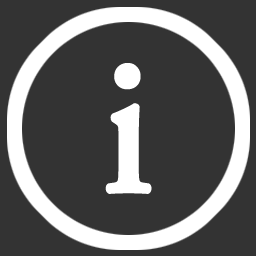
<style>
.page{position:relative;width:256px;height:256px;background:#333333}
.page>*{position:absolute;margin:0}
.t1{font:200px "AGaramondPro-Regular";letter-spacing:0.01em;color:#ffffff;font-weight:bold}
</style>
<div class="page">
<p class="t1" style="left:105px;top:63px;width:47px;height:131px">i</p>
</div>
